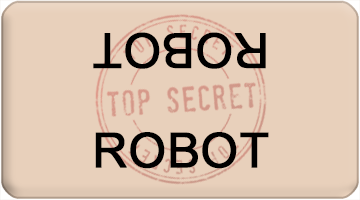
<style>
.page{position:relative;width:360px;height:200px;background:#e8d0bb}
.page>*{position:absolute;margin:0}
.t1{font:48px "ArialMT";color:#000000;font-weight:bold}
</style>
<div class="page">
<p class="t1" style="left:93px;top:32px;width:173px;height:37px;rotate:180deg">ROBOT</p>
<p class="t1" style="left:95px;top:132px;width:174px;height:37px">ROBOT</p>
</div>
